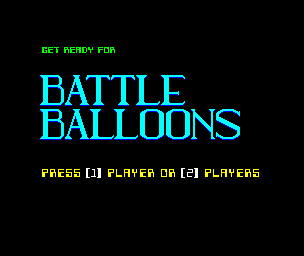
<style>
.page{position:relative;width:304px;height:256px;background:#000000}
.page>*{position:absolute;margin:0}
.t1{font:8px "Robotron";color:#00ff00}
.t2{font:10px "Robotron";color:#ffff00}
.t3{font:10px "Robotron";color:#ffffff}
</style>
<div class="page">
<p class="t1" style="left:42px;top:47px;width:73px;height:6px">Get ready for</p>
<p class="t2" style="left:42px;top:168px;width:217px;height:10px">PRESS <span class="t3">[1]</span> PLAYER OR <span class="t3">[2]</span> PLAYERS</p>
</div>
